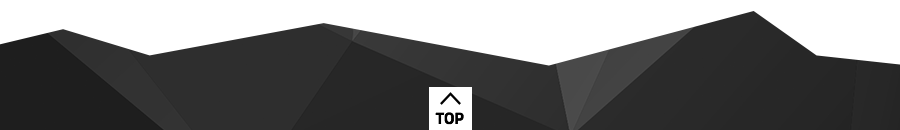
<style>
.page{position:relative;width:900px;height:130px;background:#ffffff}
.page>*{position:absolute;margin:0}
.t1{font:16px "TitilliumWeb-Bold";color:#000000}
</style>
<div class="page">
<p class="t1" style="left:435px;top:112px;width:29px;height:13px">TOP</p>
</div>
